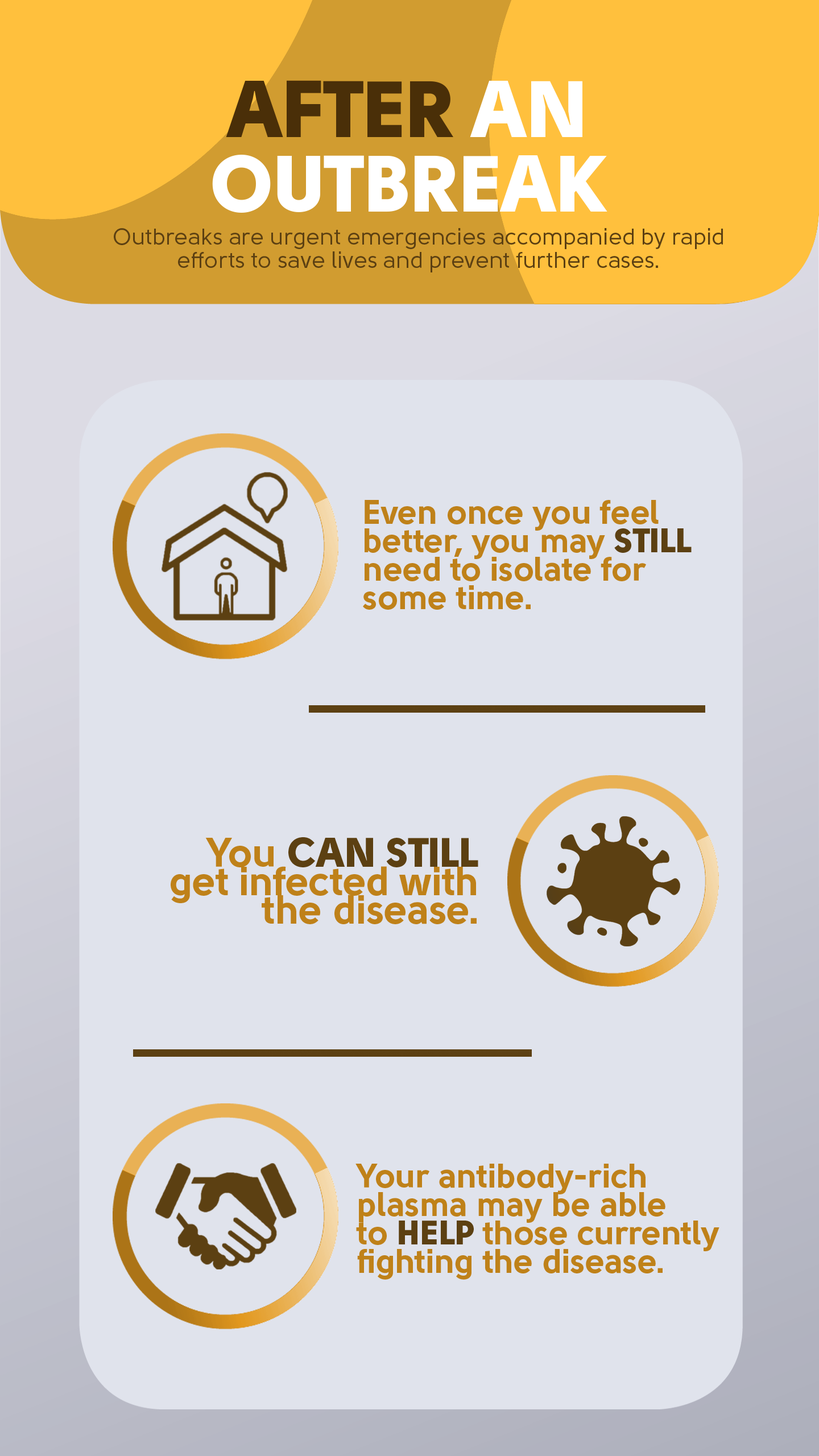
<style>
.page{position:relative;width:819px;height:1456px;background:#e0e3ec}
.page>*{position:absolute;margin:0}
.t1{font:79.6px/74.5px "Solomon-Sans-Black";color:#ffffff}
.t2{font:79.6px/74.5px "Solomon-Sans-Black";color:#4a2f08}
.t3{font:22.7px/23.3px "Solomon-Sans-Normal";color:#5c4012}
.t4{font:34.1px/28.4px "Solomon-Sans-Bold";color:#bf8119}
.t5{font:34.1px/28.4px "Solomon-Sans-Black";color:#5c4012}
.t6{font:40.9px/28.4px "Solomon-Sans-Bold";color:#bf8119}
.t7{font:40.9px/28.4px "Solomon-Sans-Black";color:#5c4012}
</style>
<div class="page">
<p class="t1" style="left:212px;top:80px;width:395px;height:133px;text-align:center"><span class="t2">AFTER</span> AN<br>OUTBREAK</p>
<p class="t3" style="left:114px;top:228px;width:609px;height:44px;text-align:center">Outbreaks are urgent emergencies accompanied by rapid<br>efforts to save lives and prevent further cases.</p>
<p class="t4" style="left:363px;top:500px;width:329px;height:110px">Even once you feel<br>better, you may <span class="t5">STILL<br></span>need to isolate for<br>some time.</p>
<p class="t6" style="left:171px;top:837px;width:307px;height:87px;text-align:right">You <span class="t7">CAN STILL<br></span>get infected with<br>the disease.</p>
<p class="t4" style="left:355px;top:1164px;width:364px;height:116px">Your antibody-rich<br>plasma may be able<br>to <span class="t5">HELP </span>those currently<br>fighting the disease.</p>
</div>
